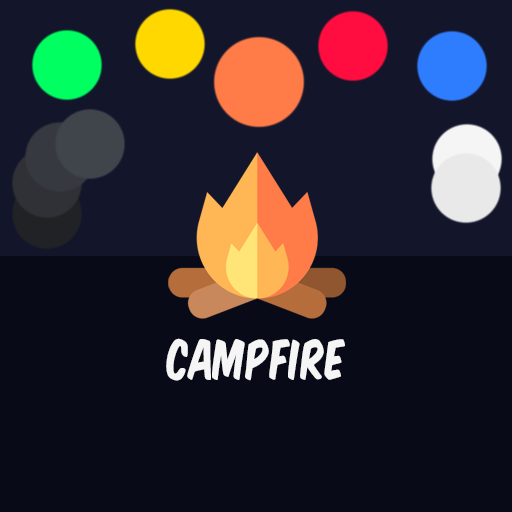
<style>
.page{position:relative;width:512px;height:512px;background:#090a18}
.page>*{position:absolute;margin:0}
.t1{font:51.9px "KomikaTitle-Kaps";color:#f5f5f5}
</style>
<div class="page">
<p class="t1" style="left:166px;top:338px;width:179px;height:43px">CAMPFIRE</p>
</div>
